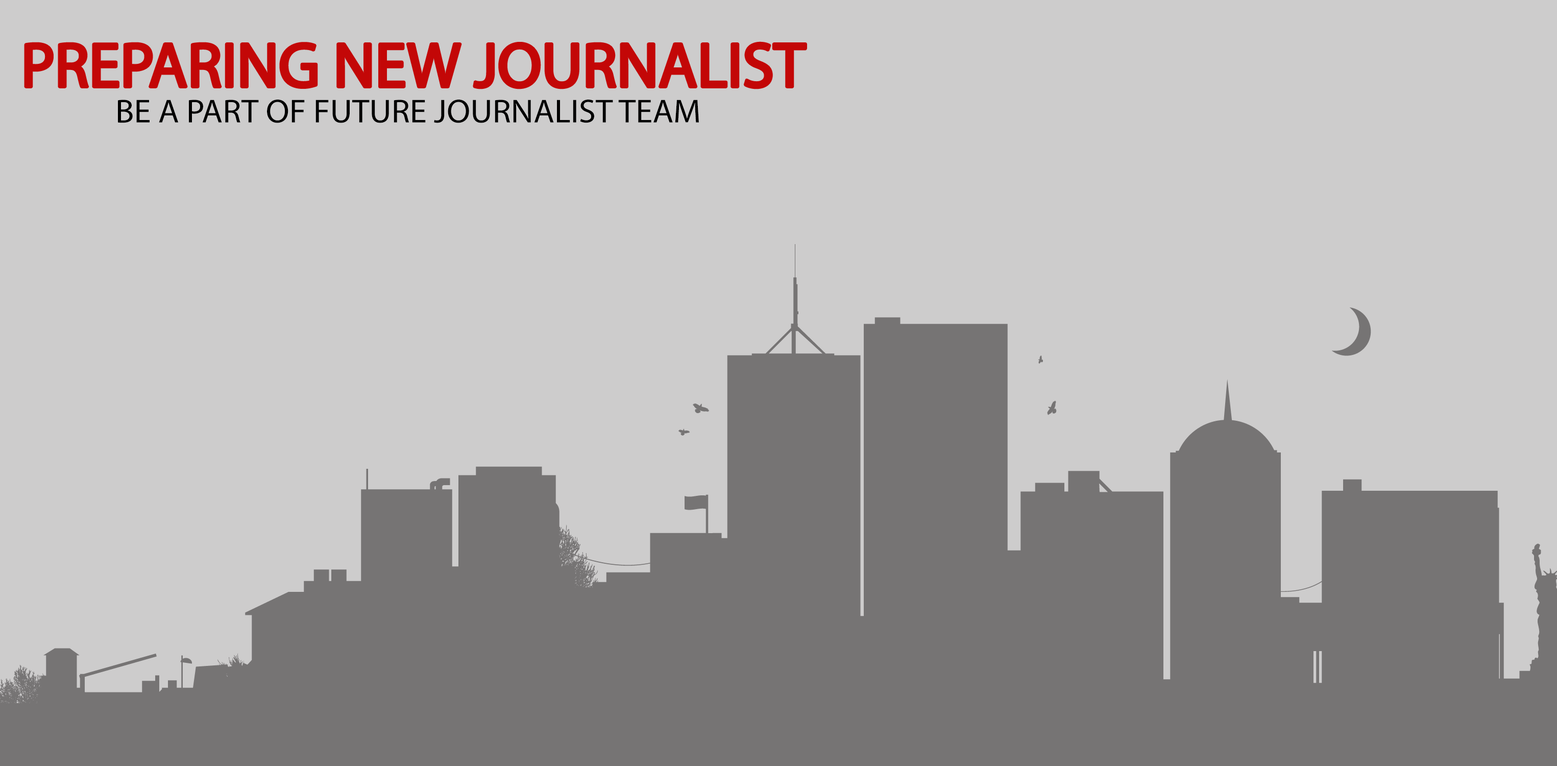
<style>
.page{position:relative;width:1557px;height:766px;background:#cdcccc}
.page>*{position:absolute;margin:0}
.t1{font:63.4px "MyriadPro-Regular";color:#c30707}
.t2{font:33.3px "MyriadPro-Regular";color:#000000}
</style>
<div class="page">
<p class="t1" style="left:26px;top:43px;width:780px;height:45px">PREPARING NEW JOURNALIST</p>
<p class="t2" style="left:118px;top:100px;width:581px;height:23px">BE A PART OF FUTURE JOURNALIST TEAM</p>
</div>
